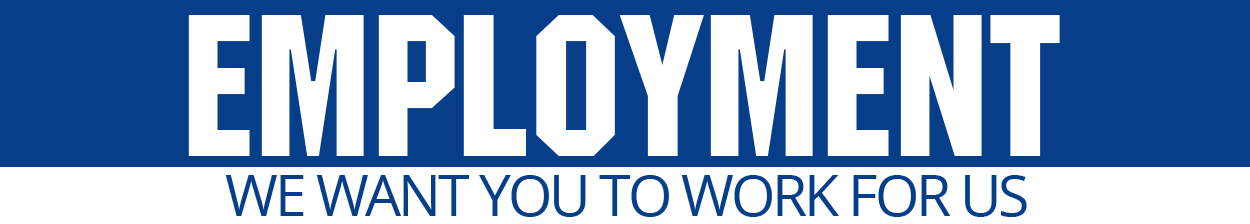
<style>
.page{position:relative;width:1250px;height:224px;background:#ffffff}
.page>*{position:absolute;margin:0}
.t1{font:212px "MachineITCTT";color:#ffffff}
.t2{font:56.7px "OpenSans";letter-spacing:-0.05em;color:#073e8a;text-transform:uppercase}
</style>
<div class="page">
<p class="t1" style="left:188px;top:15px;width:872px;height:141px">employment</p>
<p class="t2" style="left:225px;top:175px;width:802px;height:42px">we want you to work for us</p>
</div>
